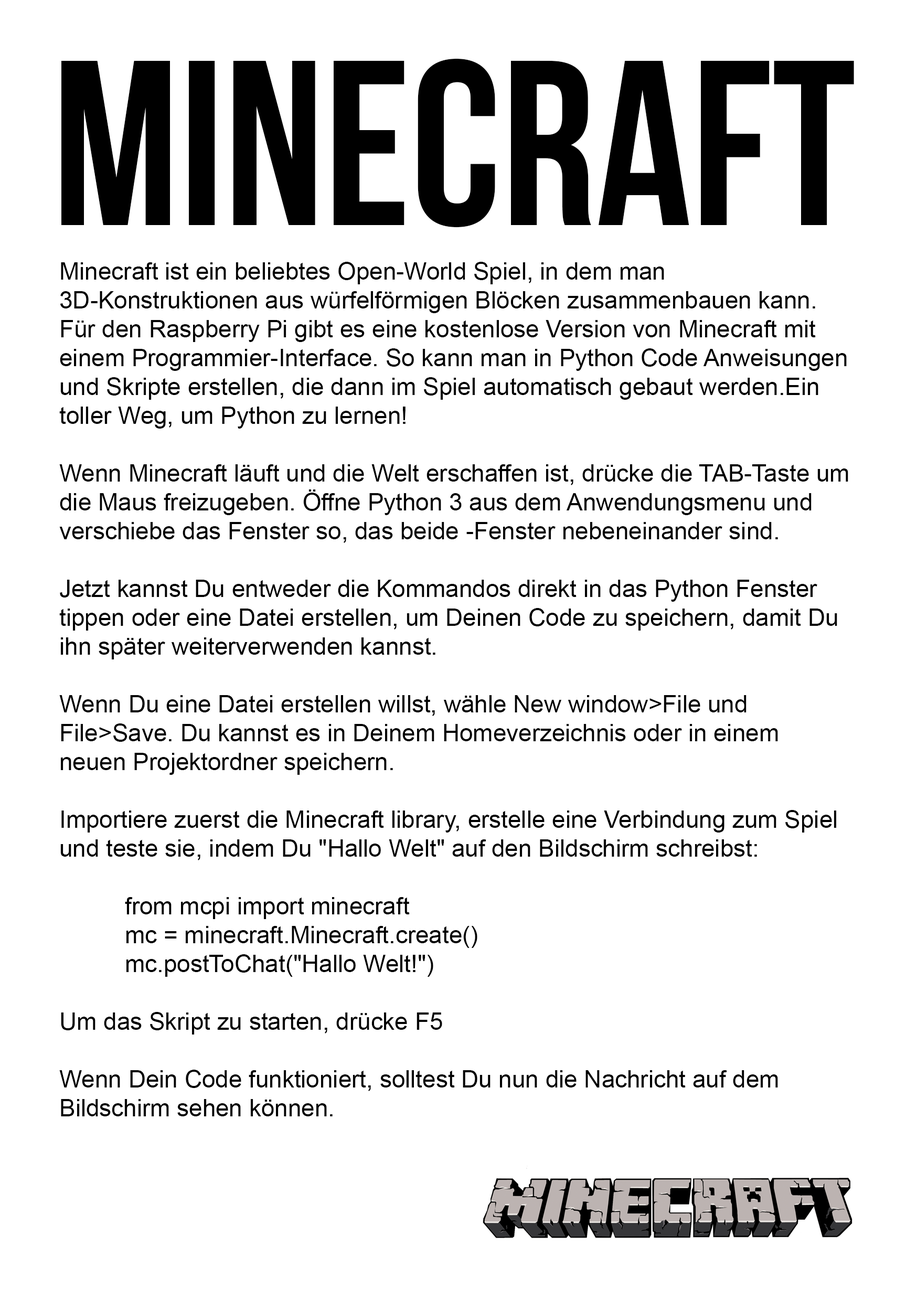
<style>
.page{position:relative;width:917px;height:1301px;background:#ffffff}
.page>*{position:absolute;margin:0}
.t1{font:234.5px "BebasNeue";color:#000000}
.t2{font:24px "ArialMT";color:#000000}
</style>
<div class="page">
<p class="t1" style="left:61px;top:58px;width:793px;height:170px">MINECRAFT</p>
<p class="t2" style="left:59px;top:262px;width:789px;height:854px">Minecraft ist ein beliebtes Open-World Spiel, in dem man 3D-Konstruktionen aus würfelförmigen Blöcken zusammenbauen kann. Für den Raspberry Pi gibt es eine kostenlose Version von Minecraft mit einem Programmier-Interface. So kann man in Python Code Anweisungen und Skripte erstellen, die dann im Spiel automatisch gebaut werden.Ein toller Weg, um Python zu lernen!<br><br>Wenn Minecraft läuft und die Welt erschaffen ist, drücke die TAB-Taste um die Maus freizugeben. Öffne Python 3 aus dem Anwendungsmenu und verschiebe das Fenster so, das beide -Fenster nebeneinander sind.<br><br>Jetzt kannst Du entweder die Kommandos direkt in das Python Fenster tippen oder eine Datei erstellen, um Deinen Code zu speichern, damit Du ihn später weiterverwenden kannst.<br><br>Wenn Du eine Datei erstellen willst, wähle New window&gt;File und File&gt;Save. Du kannst es in Deinem Homeverzeichnis oder in einem neuen Projektordner speichern. <br><br>Importiere zuerst die Minecraft library, erstelle eine Verbindung zum Spiel und teste sie, indem Du "Hallo Welt" auf den Bildschirm schreibst:<br><br>from mcpi import minecraft<br>mc = minecraft.Minecraft.create()<br>mc.postToChat("Hallo Welt!")<br><br>Um das Skript zu starten, drücke F5<br><br>Wenn Dein Code funktioniert, solltest Du nun die Nachricht auf dem Bildschirm sehen können.</p>
</div>
